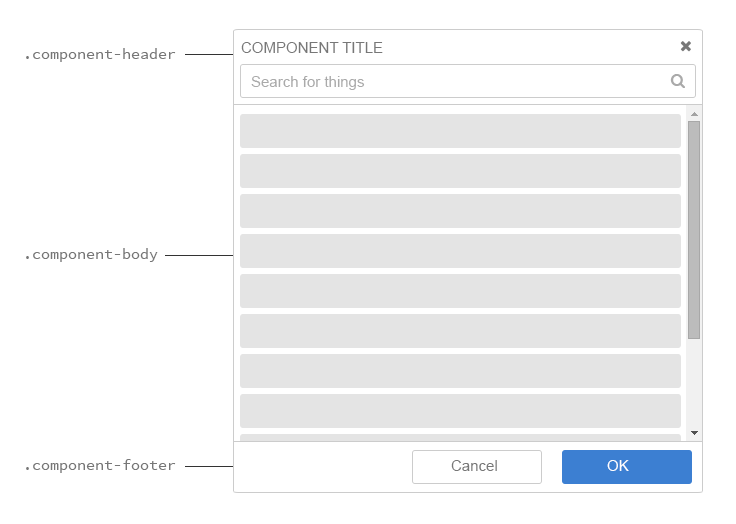
<style>
.page{position:relative;width:736px;height:524px;background:#ffffff}
.page>*{position:absolute;margin:0}
.t1{font:15px "SourceCodePro-Regular";color:#777777}
.t2{font:15px "ArialMT";color:#777777;text-transform:uppercase}
.t3{font:15px "ArialMT";color:#aaaaaa}
.t4{font:15px "ArialMT";color:#aaaaaa;text-transform:uppercase}
.t5{font:15px "ArialMT";color:#777777}
.t6{font:15px "ArialMT";color:#ffffff;text-transform:uppercase}
</style>
<div class="page">
<p class="t1" style="left:26px;top:48px;width:150px;height:14px">.component-header</p>
<p class="t2" style="left:241px;top:42px;width:142px;height:11px">Component title</p>
<p class="t3" style="left:251px;top:76px;width:114px;height:14px"><span class="t4">S</span>earch for things</p>
<p class="t1" style="left:26px;top:248px;width:132px;height:14px">.component-body</p>
<p class="t1" style="left:26px;top:459px;width:150px;height:14px">.component-footer</p>
<p class="t5" style="left:451px;top:460px;width:46px;height:11px">Cancel</p>
<p class="t6" style="left:607px;top:460px;width:22px;height:11px">OK</p>
</div>
